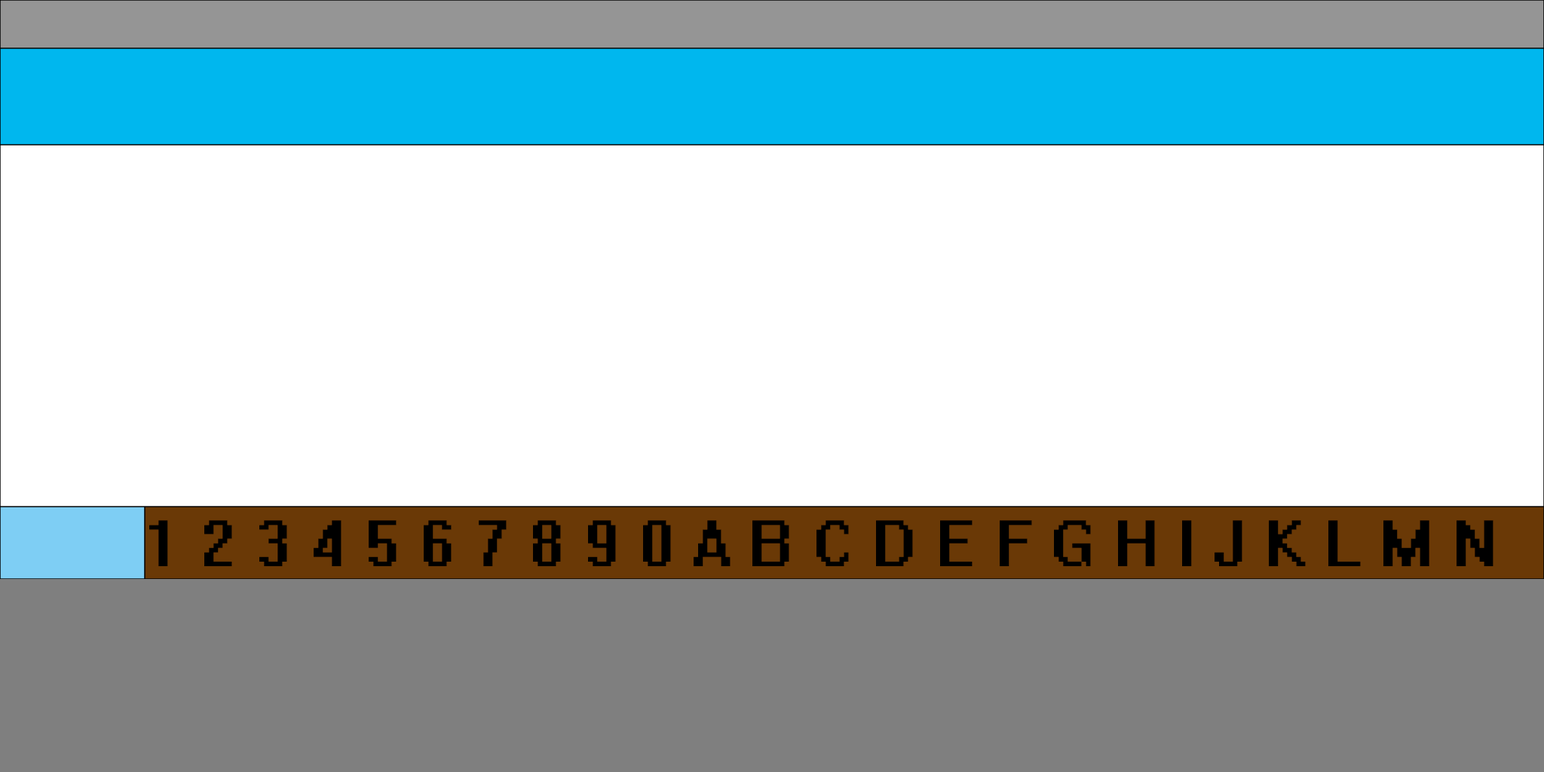
<style>
.page{position:relative;width:1544px;height:772px;background:#ffffff}
.page>*{position:absolute;margin:0}
.t1{font:73.1px "System";color:#000000}
</style>
<div class="page">
<p class="t1" style="left:149px;top:520px;width:1345px;height:46px">1 2 3 4 5 6 7 8 9 0 A B C D E F G H I J K L M N</p>
</div>
